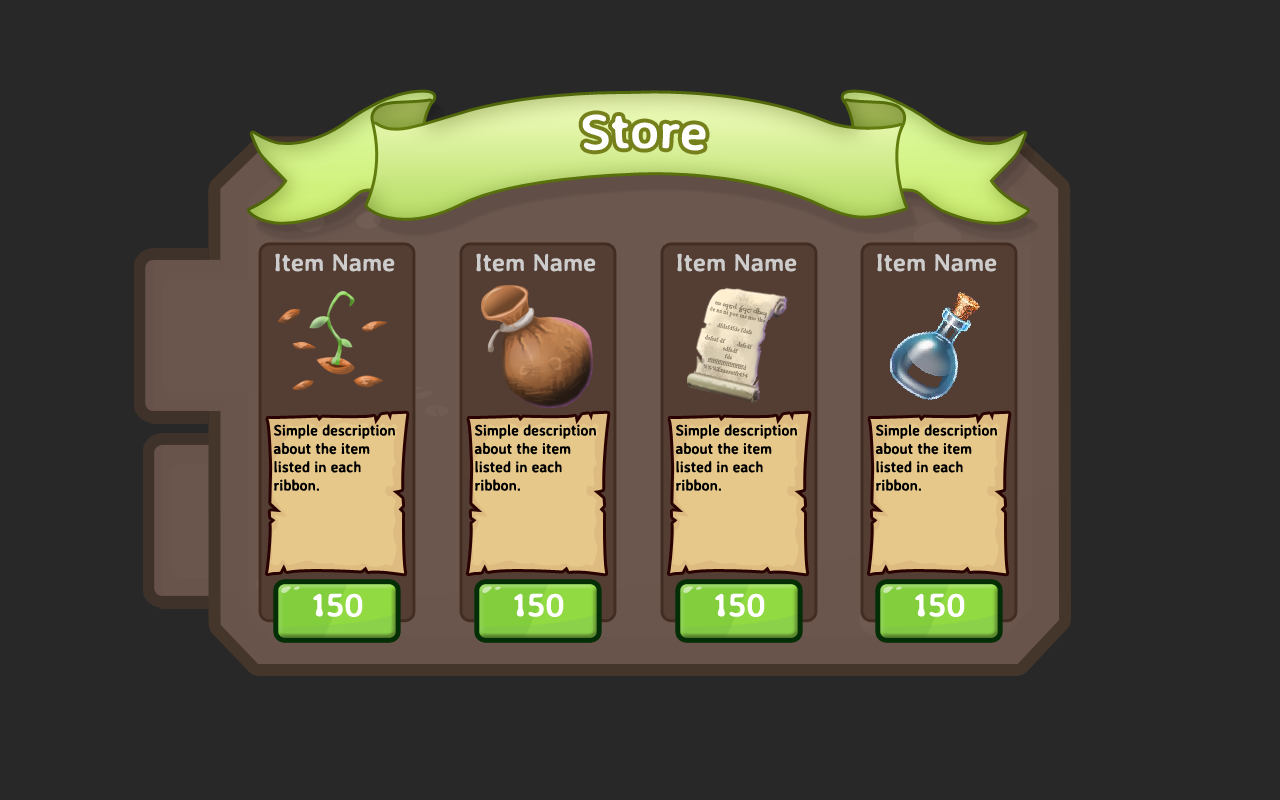
<style>
.page{position:relative;width:1280px;height:800px;background:#282828}
.page>*{position:absolute;margin:0}
.t1{font:50px "AveriaSansLibre-Bold";color:#fefffc}
.t2{font:25px "AveriaSansLibre-Bold";color:#cccccc}
.t3{font:15.3px "AveriaSansLibre-Bold";color:#000000;scale:0.96 1}
.t4{font:33.3px "AveriaSansLibre-Bold";color:#ffffff}
</style>
<div class="page">
<p class="t1" style="left:582px;top:114px;width:124px;height:37px">Store</p>
<p class="t2" style="left:275px;top:253px;width:120px;height:19px">Item Name</p>
<p class="t2" style="left:476px;top:253px;width:120px;height:19px">Item Name</p>
<p class="t2" style="left:677px;top:253px;width:120px;height:19px">Item Name</p>
<p class="t2" style="left:877px;top:253px;width:120px;height:19px">Item Name</p>
<p class="t3" style="left:273px;top:424px;width:122px;height:67px">Simple description about the item listed in each ribbon.</p>
<p class="t3" style="left:474px;top:424px;width:122px;height:67px">Simple description about the item listed in each ribbon.</p>
<p class="t3" style="left:675px;top:424px;width:122px;height:67px">Simple description about the item listed in each ribbon.</p>
<p class="t3" style="left:875px;top:424px;width:122px;height:67px">Simple description about the item listed in each ribbon.</p>
<p class="t4" style="left:313px;top:593px;width:50px;height:24px">150</p>
<p class="t4" style="left:514px;top:593px;width:50px;height:24px">150</p>
<p class="t4" style="left:715px;top:593px;width:50px;height:24px">150</p>
<p class="t4" style="left:915px;top:593px;width:50px;height:24px">150</p>
</div>
